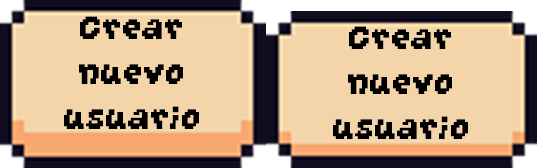
<style>
.page{position:relative;width:537px;height:168px;background:#f3d5a9}
.page>*{position:absolute;margin:0}
.t1{font:45px/45px "GrapeSoda";color:#000000}
</style>
<div class="page">
<p class="t1" style="left:64px;top:16px;width:135px;height:113px;text-align:center">Crear nuevo usuario</p>
<p class="t1" style="left:333px;top:26px;width:135px;height:113px;text-align:center">Crear nuevo usuario</p>
</div>
